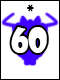
<style>
.page{position:relative;width:60px;height:80px;background:#ffffff}
.page>*{position:absolute;margin:0}
.t1{font:16.7px "ShowcardGothic-Reg";color:#000000}
.t2{font:33.3px "ShowcardGothic-Reg";color:#ffffff}
</style>
<div class="page">
<p class="t1" style="left:27px;top:4px;width:7px;height:8px">*</p>
<p class="t2" style="left:11px;top:27px;width:36px;height:26px">60</p>
</div>
